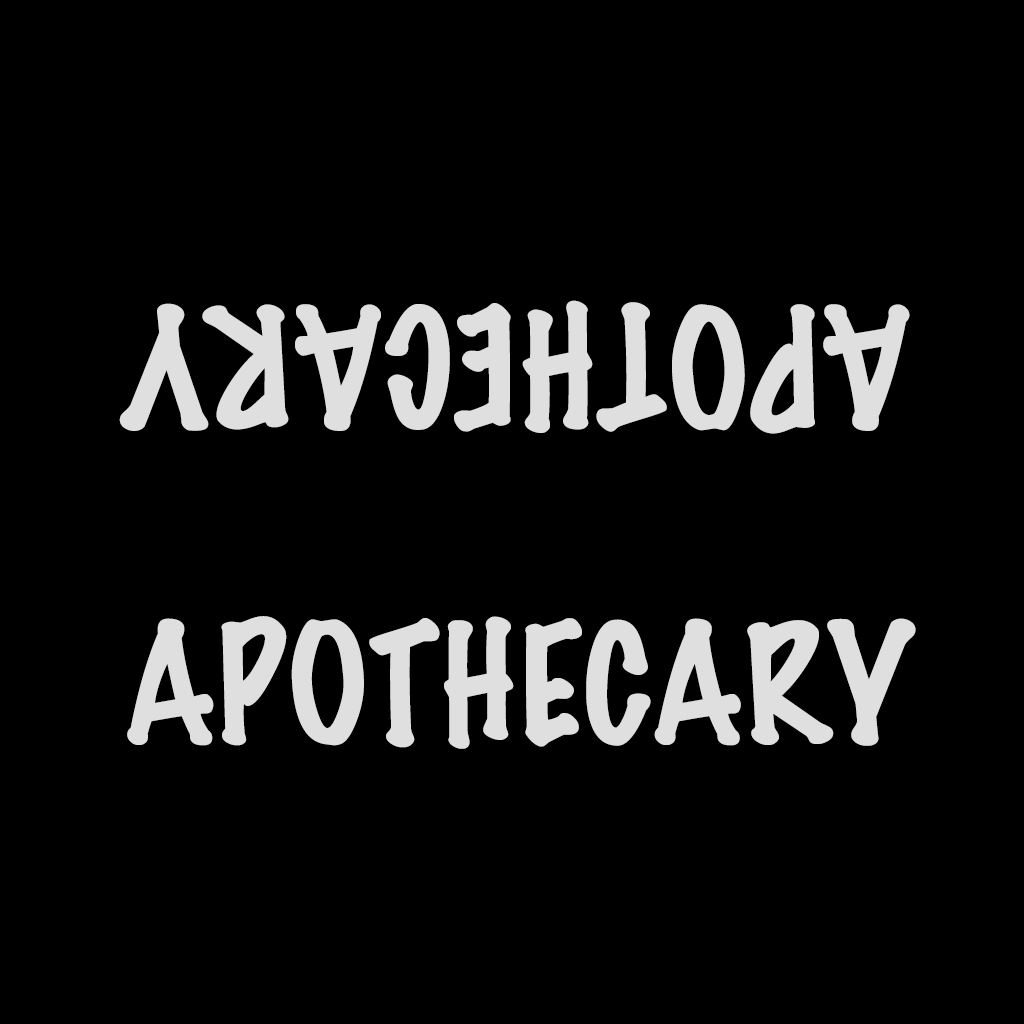
<style>
.page{position:relative;width:1024px;height:1024px;background:#000000}
.page>*{position:absolute;margin:0}
.t1{font:150px "MarkerFelt-Thin";color:#dfdfdf}
</style>
<div class="page">
<p class="t1" style="left:119px;top:300px;width:791px;height:134px;rotate:180deg">APOTHECARY</p>
<p class="t1" style="left:127px;top:616px;width:789px;height:133px">APOTHECARY</p>
</div>
